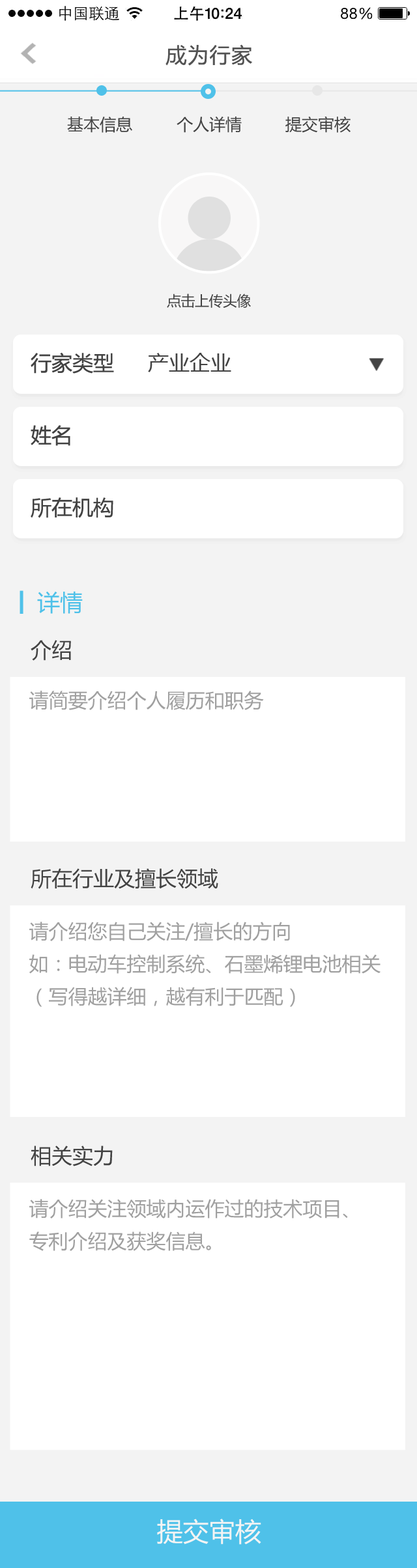
<style>
.page{position:relative;width:417px;height:1568px;background:#ffffff}
.page>*{position:absolute;margin:0}
.t1{font:20.8px "MicrosoftYaHei";letter-spacing:0.05em;color:#535353}
.t2{font:16.3px "MicrosoftYaHei";color:#434343}
.t3{font:14.3px "MicrosoftYaHei";letter-spacing:-0.025em;color:#434343}
.t4{font:20.8px "MicrosoftYaHei";color:#434343}
.t5{font:22.8px "MicrosoftYaHei";color:#4fc1e9}
.t6{font:19.5px "MicrosoftYaHei";color:#a0a0a0}
.t7{font:19.5px/32.5px "MicrosoftYaHei";color:#a0a0a0}
.t8{font:26px "MicrosoftYaHei";color:#f4f4f4}
</style>
<div class="page">
<p class="t1" style="left:165px;top:44px;width:87px;height:22px">成为行家</p>
<p class="t2" style="left:67px;top:117px;width:65px;height:16px">基本信息</p>
<p class="t2" style="left:176px;top:117px;width:65px;height:16px">个人详情</p>
<p class="t2" style="left:285px;top:116px;width:65px;height:17px">提交审核</p>
<p class="t3" style="left:167px;top:294px;width:84px;height:14px">点击上传头像</p>
<p class="t4" style="left:31px;top:352px;width:83px;height:22px">行家类型</p>
<p class="t4" style="left:148px;top:353px;width:83px;height:19px">产业企业</p>
<p class="t4" style="left:31px;top:425px;width:39px;height:21px">姓名</p>
<p class="t4" style="left:31px;top:497px;width:82px;height:21px">所在机构</p>
<p class="t5" style="left:37px;top:591px;width:46px;height:23px">详情</p>
<p class="t4" style="left:31px;top:640px;width:40px;height:21px">介绍</p>
<p class="t6" style="left:29px;top:691px;width:235px;height:19px">请简要介绍个人履历和职务</p>
<p class="t4" style="left:31px;top:868px;width:187px;height:21px">所在行业及擅长领域</p>
<p class="t7" style="left:29px;top:922px;width:351px;height:85px">请介绍您自己关注/擅长的方向<br>如：电动车控制系统、石墨烯锂电池相关<br>（写得越详细，越有利于匹配）</p>
<p class="t4" style="left:31px;top:1146px;width:82px;height:20px">相关实力</p>
<p class="t7" style="left:29px;top:1199px;width:319px;height:52px">请介绍关注领域内运作过的技术项目、<br>专利介绍及获奖信息。</p>
<p class="t8" style="left:157px;top:1519px;width:104px;height:26px">提交审核</p>
</div>
